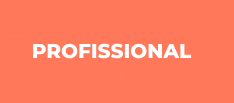
<style>
.page{position:relative;width:234px;height:103px;background:#ff785a}
.page>*{position:absolute;margin:0}
.t1{font:20px "Montserrat-ExtraBold";color:#ffffff}
</style>
<div class="page">
<p class="t1" style="left:33px;top:43px;width:159px;height:16px">PROFISSIONAL</p>
</div>
